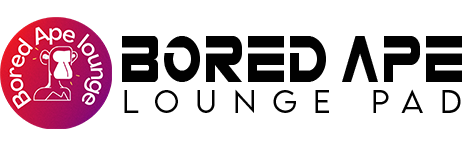
<style>
.page{position:relative;width:462px;height:150px;background:#ffffff}
.page>*{position:absolute;margin:0}
.t1{font:29.2px "LEMONMILK-Light";letter-spacing:0.545em;color:#010101}
.t2{font:50px "NDLOGOS";color:#010101;scale:0.8 1}
</style>
<div class="page">
<p class="t1" style="left:122px;top:36px;width:340px;height:77px"><span class="t2">Bored Ape<br></span>Lounge Pad</p>
</div>
